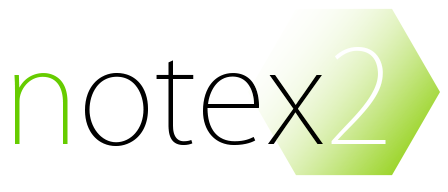
<style>
.page{position:relative;width:448px;height:192px;background:#ffffff}
.page>*{position:absolute;margin:0}
.t1{font:128px "KozGoPr6N-ExtraLight";color:#000000}
.t2{font:128px "KozGoPr6N-ExtraLight";color:#66cc00}
.t3{font:128px "KozGoPr6N-ExtraLight";color:#ffffff}
</style>
<div class="page">
<p class="t1" style="left:14px;top:46px;width:372px;height:100px"><span class="t2">n</span>otex<span class="t3">2</span></p>
</div>
